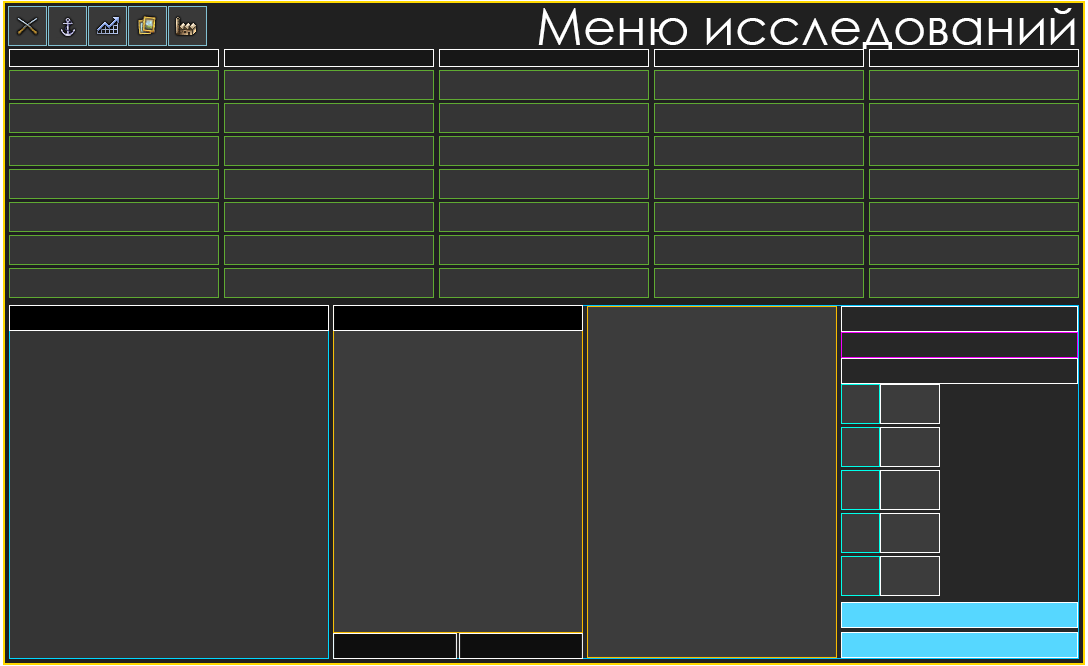
<style>
.page{position:relative;width:1088px;height:666px;background:#353535}
.page>*{position:absolute;margin:0}
.t1{font:51px "CenturyGothic";color:#ffffff}
</style>
<div class="page">
<p class="t1" style="left:538px;top:8px;width:537px;height:41px">Меню исследований</p>
</div>
